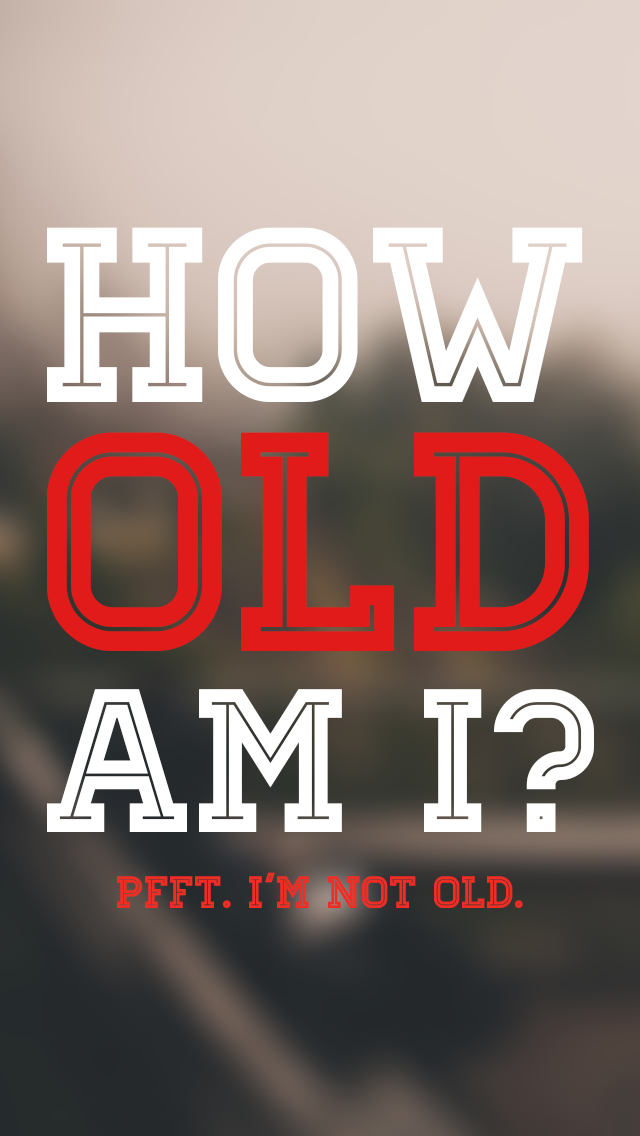
<style>
.page{position:relative;width:640px;height:1136px}
.page>*{position:absolute;margin:0}
.t1{font:203.8px/181.1px "Homestead-Inline";color:#ffffff}
.t2{font:249px/249px "Homestead-Inline";color:#ffffff}
.t3{font:312.4px/249px "Homestead-Inline";color:#e11a1a}
.t4{font:45.3px "Homestead-Inline";color:#ee2d24}
</style>
<div class="page">
<p class="t1" style="left:47px;top:227px;width:547px;height:605px"><span class="t2">How<br></span><span class="t3">Old<br></span>am I?</p>
<p class="t4" style="left:117px;top:872px;width:406px;height:36px">Pfft. I’m not old.</p>
</div>
